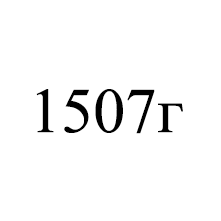
<style>
.page{position:relative;width:221px;height:221px;background:#ffffff}
.page>*{position:absolute;margin:0}
.t1{font:63.9px "TimesNewRomanPSMT";color:#000000}
</style>
<div class="page">
<p class="t1" style="left:36px;top:89px;width:147px;height:45px">1507г</p>
</div>
